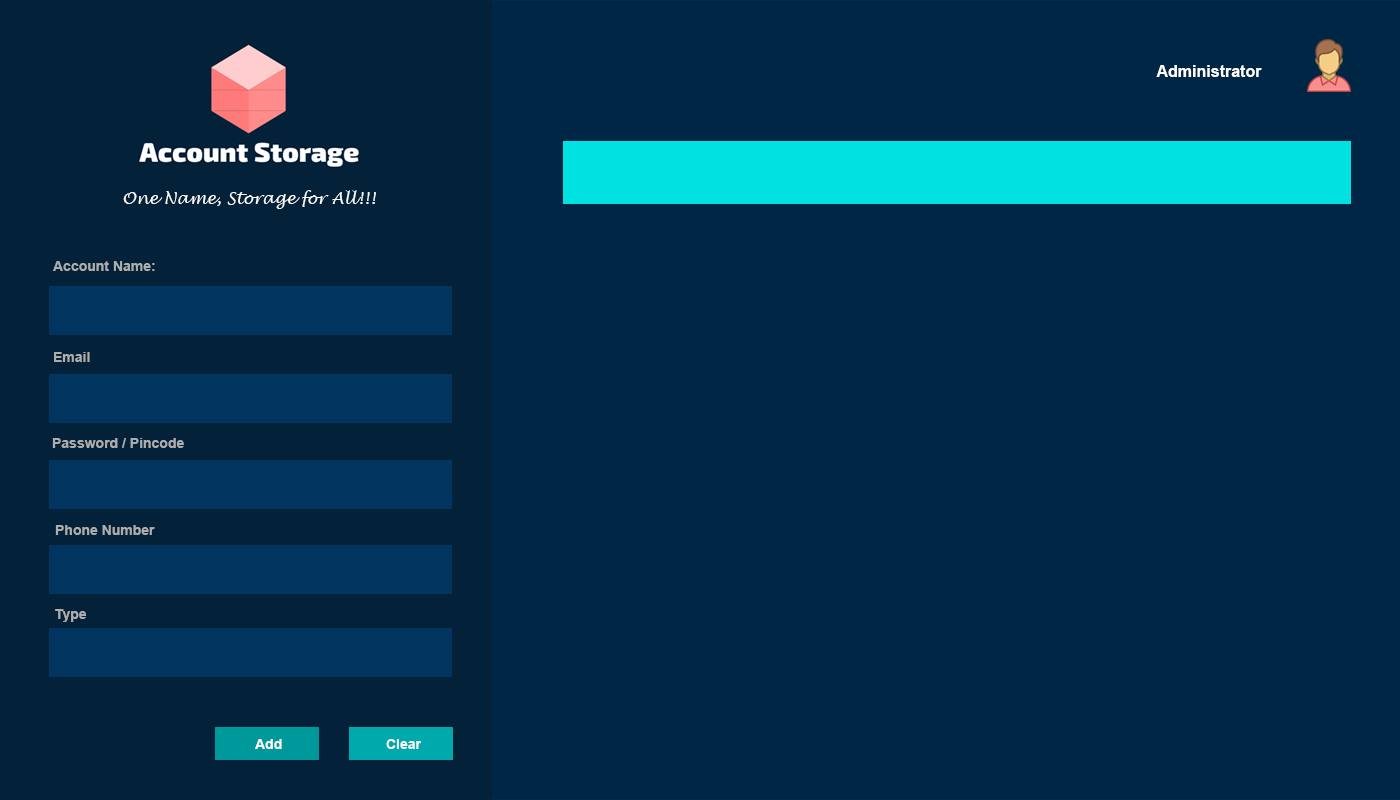
<style>
.page{position:relative;width:1400px;height:800px;background:#002645}
.page>*{position:absolute;margin:0}
.t1{font:16px "Arial-BoldMT";color:#ffffff}
.t2{font:16px "LucidaHandwriting-Italic";color:#fafafa}
.t3{font:14px "Arial-BoldMT";color:#adadad}
.t4{font:14px "Arial-BoldMT";color:#fafafa}
</style>
<div class="page">
<p class="t1" style="left:1156px;top:65px;width:106px;height:12px">Administrator</p>
<p class="t2" style="left:123px;top:190px;width:253px;height:19px">One Name, Storage for All!!!</p>
<p class="t3" style="left:53px;top:261px;width:102px;height:10px">Account Name:</p>
<p class="t3" style="left:54px;top:352px;width:36px;height:10px">Email</p>
<p class="t3" style="left:52px;top:438px;width:132px;height:10px">Password / Pincode</p>
<p class="t3" style="left:55px;top:525px;width:100px;height:10px">Phone Number</p>
<p class="t3" style="left:55px;top:609px;width:32px;height:13px">Type</p>
<p class="t4" style="left:255px;top:739px;width:27px;height:10px">Add</p>
<p class="t4" style="left:386px;top:739px;width:35px;height:10px">Clear</p>
</div>
